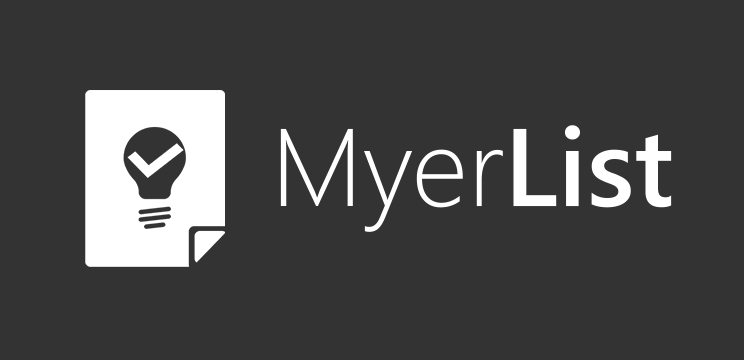
<style>
.page{position:relative;width:744px;height:360px;background:#333333}
.page>*{position:absolute;margin:0}
.t1{font:110px "SegoeWP-Light";color:#ffffff}
.t2{font:110px "SegoeWP-Semibold";color:#ffffff}
</style>
<div class="page">
<p class="t1" style="left:280px;top:125px;width:392px;height:107px">Myer<span class="t2">List</span></p>
</div>
